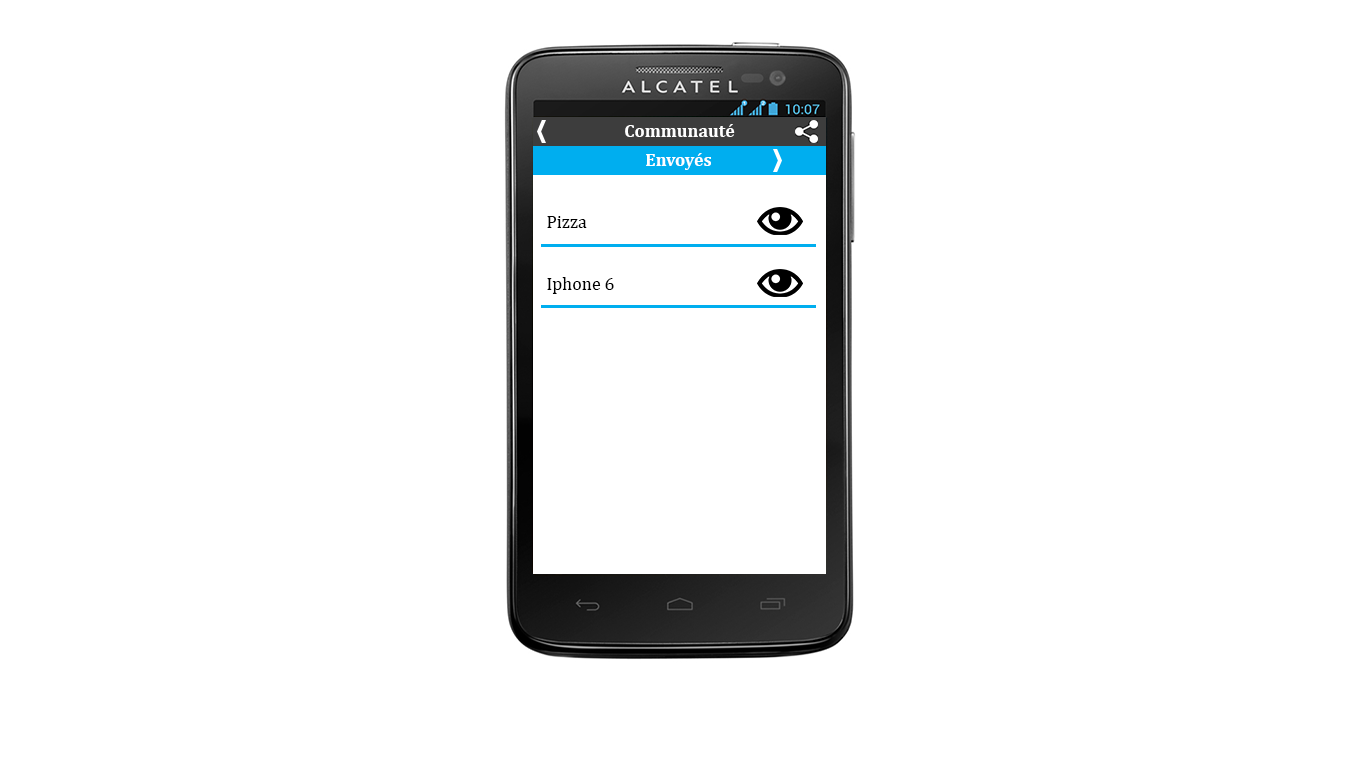
<style>
.page{position:relative;width:1366px;height:768px;background:#ffffff}
.page>*{position:absolute;margin:0}
.t1{font:18px "Cambria-Bold";color:#ffffff}
.t2{font:18px "Cambria";color:#000000}
</style>
<div class="page">
<p class="t1" style="left:625px;top:124px;width:110px;height:13px">Communauté</p>
<p class="t1" style="left:646px;top:153px;width:65px;height:17px">Envoyés</p>
<p class="t2" style="left:547px;top:216px;width:40px;height:12px">Pizza</p>
<p class="t2" style="left:547px;top:277px;width:67px;height:17px">Iphone 6</p>
</div>
